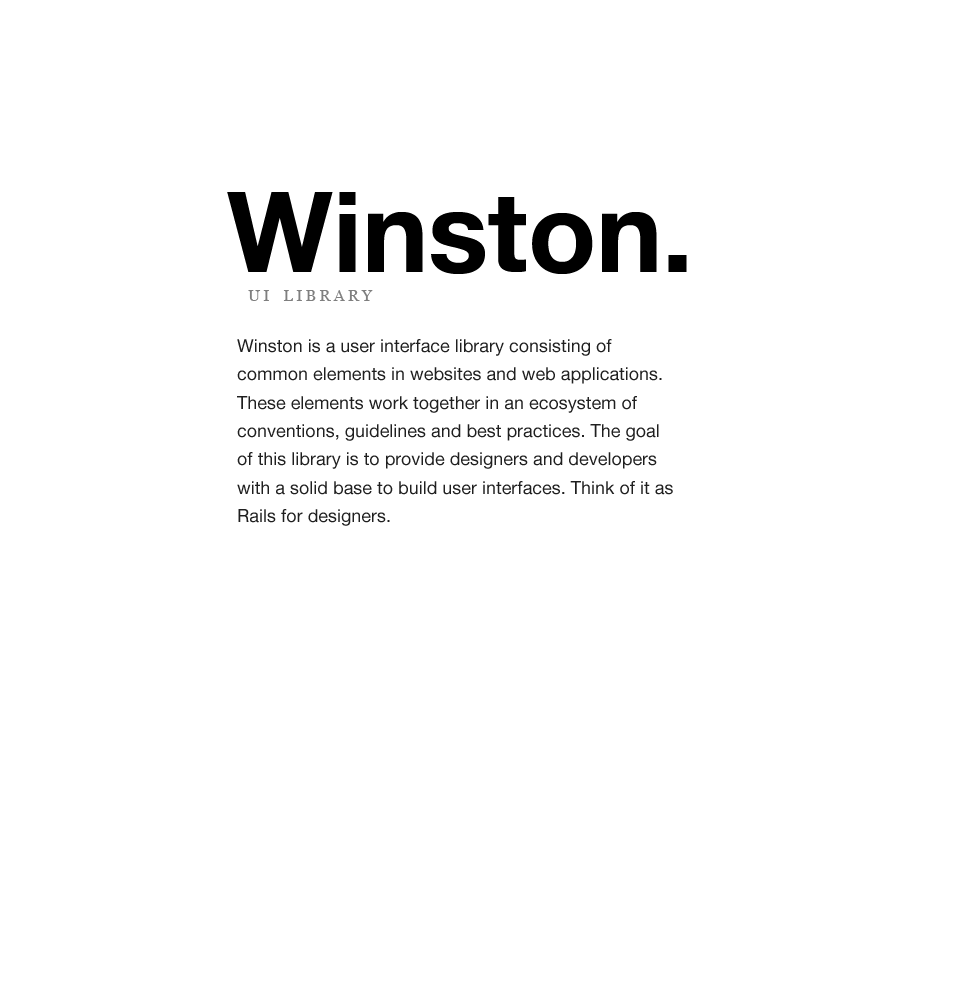
<style>
.page{position:relative;width:960px;height:1000px;background:#ffffff}
.page>*{position:absolute;margin:0}
.t1{font:112px "HelveticaNeue-Bold";color:#000000}
.t2{font:16px "Georgia";letter-spacing:0.2em;color:#7f7f7f}
.t3{font:18px/28.4px "HelveticaNeue";color:#1f1f1f}
</style>
<div class="page">
<p class="t1" style="left:227px;top:192px;width:460px;height:82px">Winston.</p>
<p class="t2" style="left:248px;top:290px;width:125px;height:11px">UI LIBRARY</p>
<p class="t3" style="left:237px;top:339px;width:436px;height:187px">Winston is a user interface library consisting of common elements in websites and web applications. These elements work together in an ecosystem of conventions, guidelines and best practices. The goal of this library is to provide designers and developers with a solid base to build user interfaces. Think of it as Rails for designers.</p>
</div>
